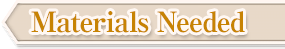
<style>
.page{position:relative;width:285px;height:49px}
.page>*{position:absolute;margin:0}
.t1{font:28px "RyuminPro-ExBold";letter-spacing:-0.04em;color:#c98304}
</style>
<div class="page">
<p class="t1" style="left:31px;top:11px;width:214px;height:22px">Materials Needed</p>
</div>
